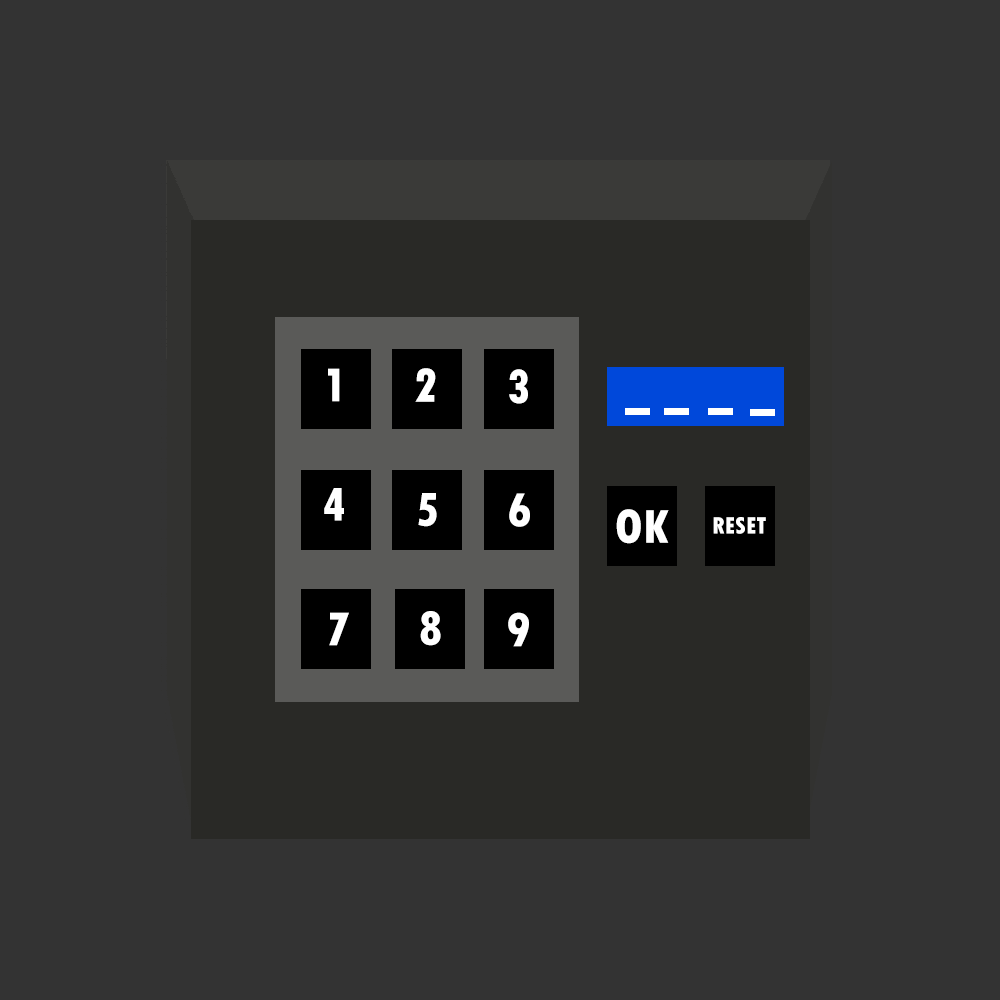
<style>
.page{position:relative;width:1000px;height:1000px;background:#333333}
.page>*{position:absolute;margin:0}
.t1{font:50px "TwCenMT-CondensedExtraBold";color:#ffffff}
.t2{font:25px "TwCenMT-CondensedExtraBold";color:#ffffff}
</style>
<div class="page">
<p class="t1" style="left:328px;top:368px;width:12px;height:34px">1</p>
<p class="t1" style="left:415px;top:368px;width:21px;height:34px">2</p>
<p class="t1" style="left:509px;top:369px;width:19px;height:35px">3</p>
<p class="t1" style="left:324px;top:488px;width:20px;height:33px">4</p>
<p class="t1" style="left:418px;top:493px;width:19px;height:34px">5</p>
<p class="t1" style="left:509px;top:493px;width:21px;height:34px">6</p>
<p class="t1" style="left:616px;top:509px;width:53px;height:35px">OK</p>
<p class="t2" style="left:713px;top:517px;width:53px;height:17px">RESET</p>
<p class="t1" style="left:329px;top:612px;width:20px;height:34px">7</p>
<p class="t1" style="left:420px;top:611px;width:21px;height:35px">8</p>
<p class="t1" style="left:508px;top:612px;width:21px;height:35px">9</p>
</div>
